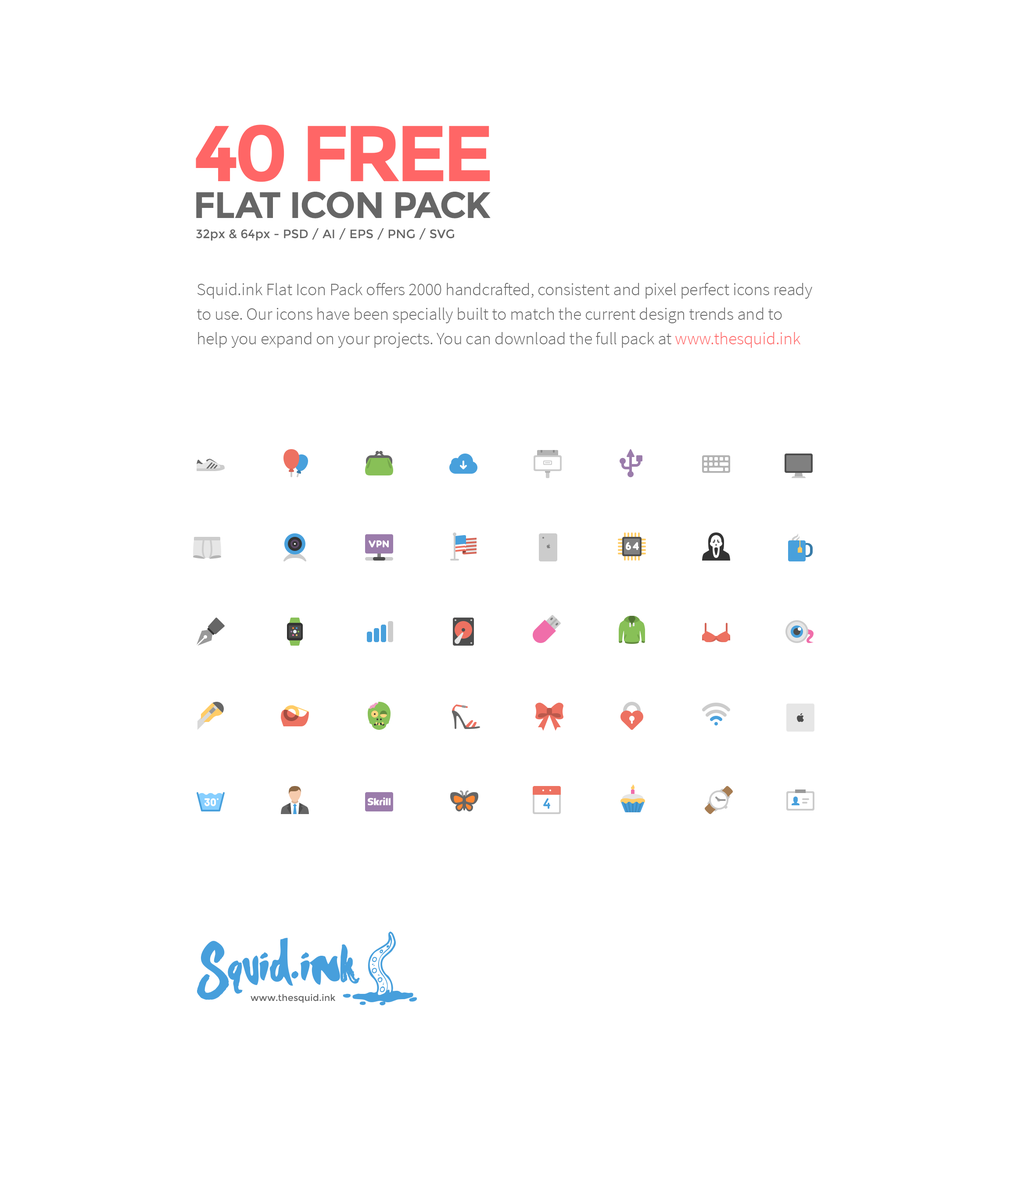
<style>
.page{position:relative;width:1011px;height:1179px;background:#ffffff}
.page>*{position:absolute;margin:0}
.t1{font:79px "Montserrat-Bold";letter-spacing:-0.05em;color:#ff6666;text-transform:uppercase}
.t2{font:36.9px "Montserrat-Bold";letter-spacing:-0.025em;color:#666666;text-transform:uppercase}
.t3{font:12.3px "Montserrat-Regular";color:#666666}
.t4{font:17.6px/24.6px "SourceSansPro-Light";letter-spacing:-0.005em;color:#666666}
.t5{font:17.6px/24.6px "SourceSansPro-Light";letter-spacing:-0.005em;color:#ff6666}
</style>
<div class="page">
<p class="t1" style="left:196px;top:125px;width:294px;height:57px">40 free</p>
<p class="t2" style="left:196px;top:192px;width:295px;height:27px">flat Icon pack</p>
<p class="t3" style="left:196px;top:228px;width:258px;height:13px">32px &amp; 64px - PSD / AI / EPS / PNG / SVG</p>
<p class="t4" style="left:197px;top:283px;width:615px;height:65px">Squid.ink Flat Icon Pack offers 2000 handcrafted, consistent and pixel perfect icons ready to use. Our icons have been specially built to match the current design trends and to help you expand on your projects. You can download the full pack at <span class="t5">www.thesquid.ink</span></p>
</div>
